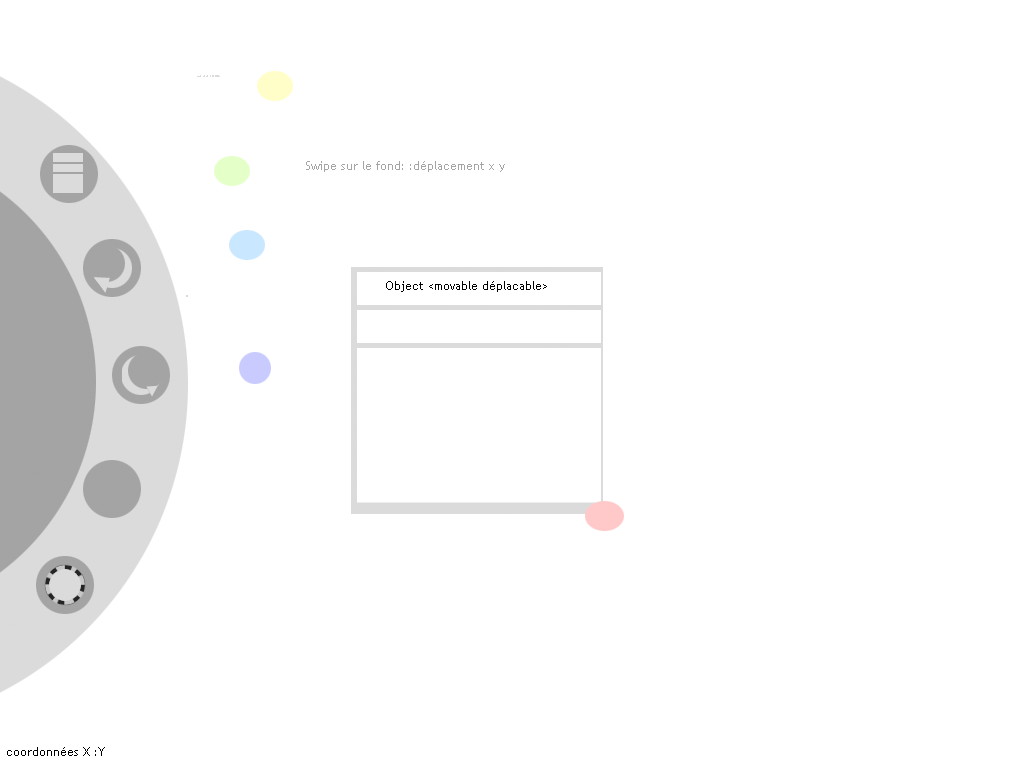
<style>
.page{position:relative;width:1024px;height:768px;background:#ffffff}
.page>*{position:absolute;margin:0}
.t1{font:3px "TrebuchetMS";color:#dadada}
.t2{font:12px "TrebuchetMS";color:#a4a4a4}
.t3{font:12px "TrebuchetMS";color:#000000}
</style>
<div class="page">
<p class="t1" style="left:197px;top:75px;width:23px;height:2px">Ape pour l’edition</p>
<p class="t2" style="left:306px;top:161px;width:199px;height:11px">Swipe sur le fond: :déplacement x y</p>
<p class="t3" style="left:386px;top:281px;width:161px;height:11px">Object &lt;movable déplacable&gt;</p>
<p class="t3" style="left:7px;top:747px;width:98px;height:9px">coordonnées X :Y</p>
</div>
